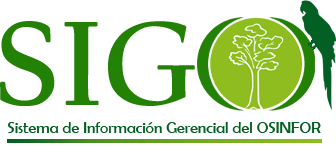
<style>
.page{position:relative;width:336px;height:146px;background:#ffffff}
.page>*{position:absolute;margin:0}
.t1{font:16px "BerlinSansFB-Reg";color:#035f23}
</style>
<div class="page">
<p class="t1" style="left:8px;top:122px;width:313px;height:11px">Sistema de Información Gerencial del OSINFOR</p>
</div>
